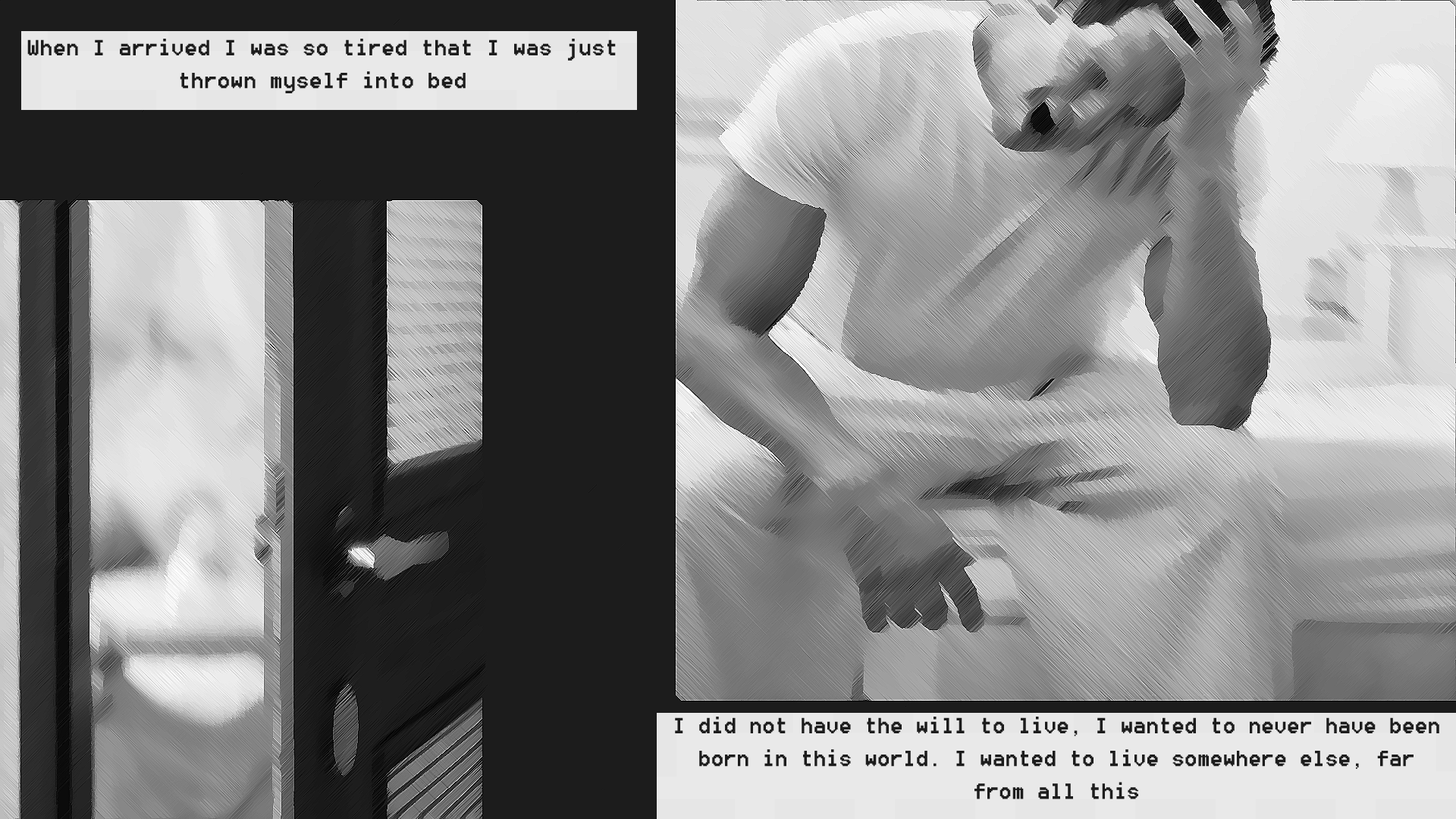
<style>
.page{position:relative;width:1456px;height:819px}
.page>*{position:absolute;margin:0}
.t1{font:27.3px "8514oem";color:#1c1c1c}
</style>
<div class="page">
<p class="t1" style="left:27px;top:39px;width:589px;height:54px;text-align:center">When I arrived I was so tired that I was just thrown myself into bed</p>
<p class="t1" style="left:675px;top:717px;width:764px;height:82px;text-align:center">I did not have the will to live, I wanted to never have been born in this world. I wanted to live somewhere else, far from all this</p>
</div>
